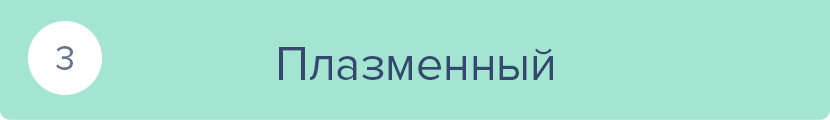
<style>
.page{position:relative;width:830px;height:120px;background:#a4e5d1}
.page>*{position:absolute;margin:0}
.t1{font:36px "ProximaNova-Regular";color:#647493}
.t2{font:48px "ProximaNova-Regular";color:#344870}
</style>
<div class="page">
<p class="t1" style="left:56px;top:46px;width:17px;height:24px">3</p>
<p class="t2" style="left:279px;top:47px;width:274px;height:33px">Плазменный</p>
</div>
